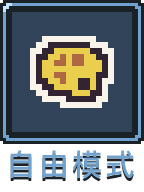
<style>
.page{position:relative;width:144px;height:192px;background:#32445a}
.page>*{position:absolute;margin:0}
.t1{font:30px "PingFang-SC-Bold";letter-spacing:0.1em;color:#71a2ce}
</style>
<div class="page">
<p class="t1" style="left:10px;top:150px;width:124px;height:29px">自由模式</p>
</div>
